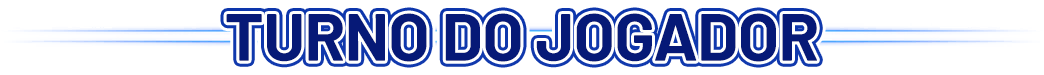
<style>
.page{position:relative;width:1044px;height:75px;background:#ffffff}
.page>*{position:absolute;margin:0}
.t1{font:66.7px "Barlow-Bold";letter-spacing:-0.01em;color:#061977}
</style>
<div class="page">
<p class="t1" style="left:226px;top:13px;width:591px;height:49px">TURNO DO JOGADOR</p>
</div>
